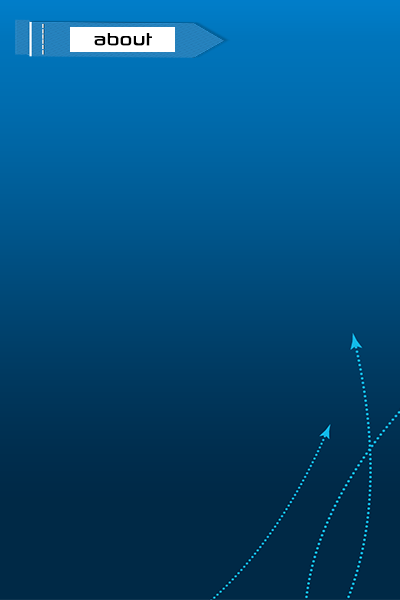
<style>
.page{position:relative;width:400px;height:600px}
.page>*{position:absolute;margin:0}
.t1{font:25px "SonySketchEF";color:#000000}
</style>
<div class="page">
<p class="t1" style="left:94px;top:33px;width:58px;height:13px">about</p>
</div>
